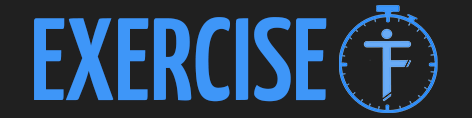
<style>
.page{position:relative;width:472px;height:118px;background:#202020}
.page>*{position:absolute;margin:0}
.t1{font:116.7px "YanoneKaffeesatz-SemiBold";color:#3e96f8}
</style>
<div class="page">
<p class="t1" style="left:34px;top:17px;width:293px;height:85px">EXERCISE</p>
</div>
